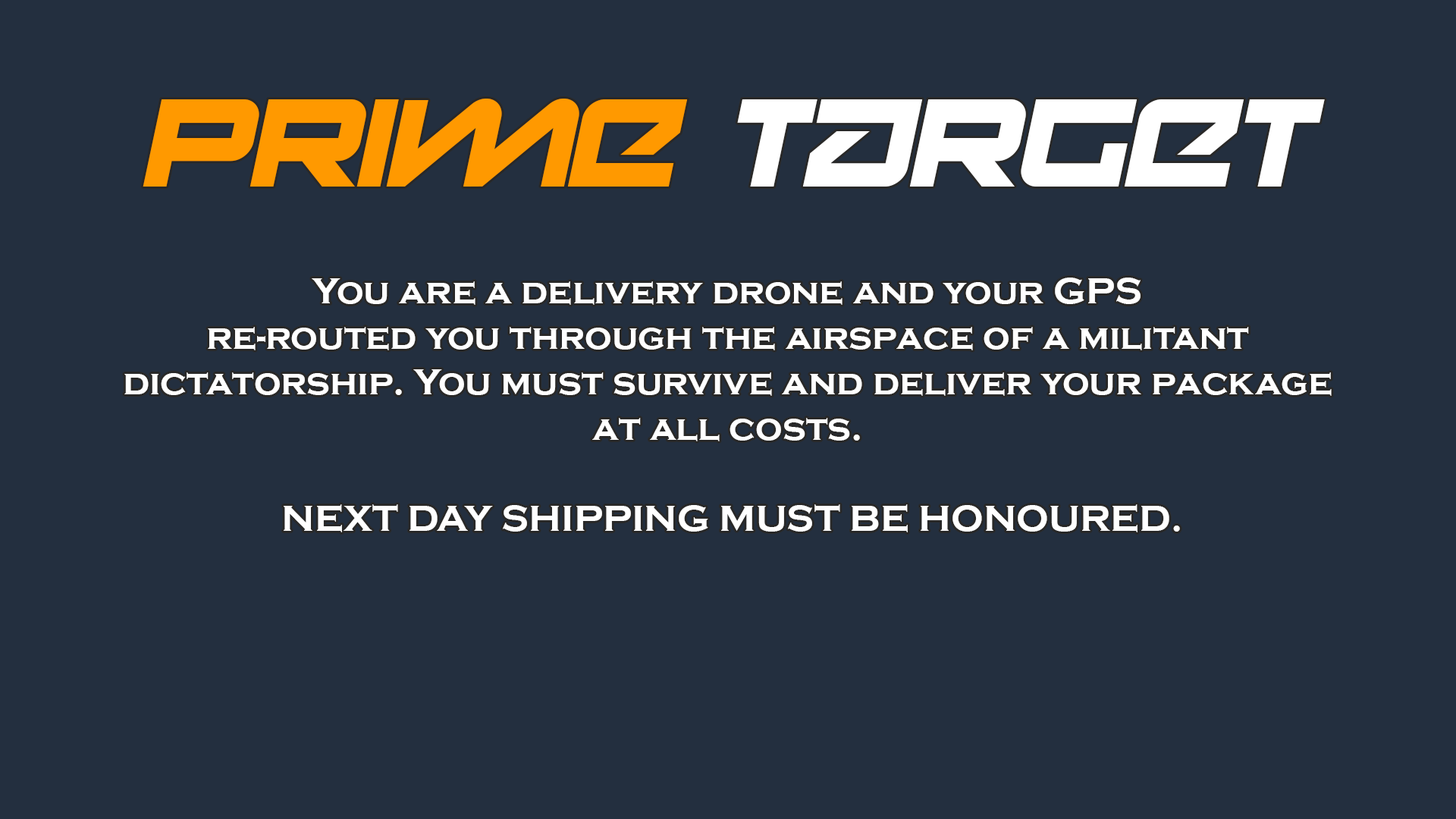
<style>
.page{position:relative;width:1456px;height:819px;background:#232f3f}
.page>*{position:absolute;margin:0}
.t1{font:29.2px "Onky-Italic";color:#ffffff}
.t2{font:29.2px "Onky-Italic";color:#ff9900}
.t3{font:37.9px "CopperplateGothic-Bold";color:#ffffff}
</style>
<div class="page">
<p class="t1" style="left:143px;top:99px;width:1182px;height:88px"><span class="t2">Prime </span>Target</p>
<p class="t3" style="left:124px;top:278px;width:1208px;height:254px;text-align:center">You are a delivery drone and your GPS <br>re-routed you through the airspace of a militant <br>dictatorship. You must survive and deliver your package <br>at all costs. <br><br>NEXT DAY SHIPPING MUST BE HONOURED.</p>
</div>
